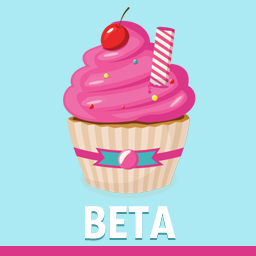
<style>
.page{position:relative;width:256px;height:256px;background:#abeaf2}
.page>*{position:absolute;margin:0}
.t1{font:48px "SansusWebissimo";color:#ffffff}
</style>
<div class="page">
<p class="t1" style="left:85px;top:208px;width:91px;height:33px">BETA</p>
<p class="t1" style="left:85px;top:206px;width:91px;height:33px">BETA</p>
</div>
